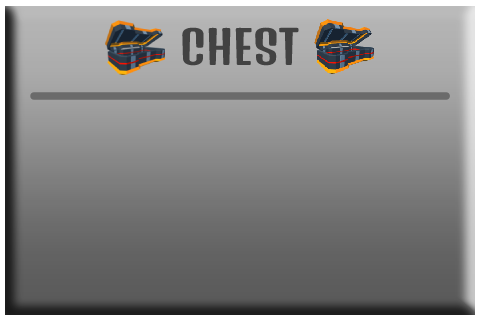
<style>
.page{position:relative;width:480px;height:320px}
.page>*{position:absolute;margin:0}
.t1{font:45px "DenkOne-Regular";color:#424242}
</style>
<div class="page">
<p class="t1" style="left:182px;top:27px;width:117px;height:39px">CHEST</p>
</div>
